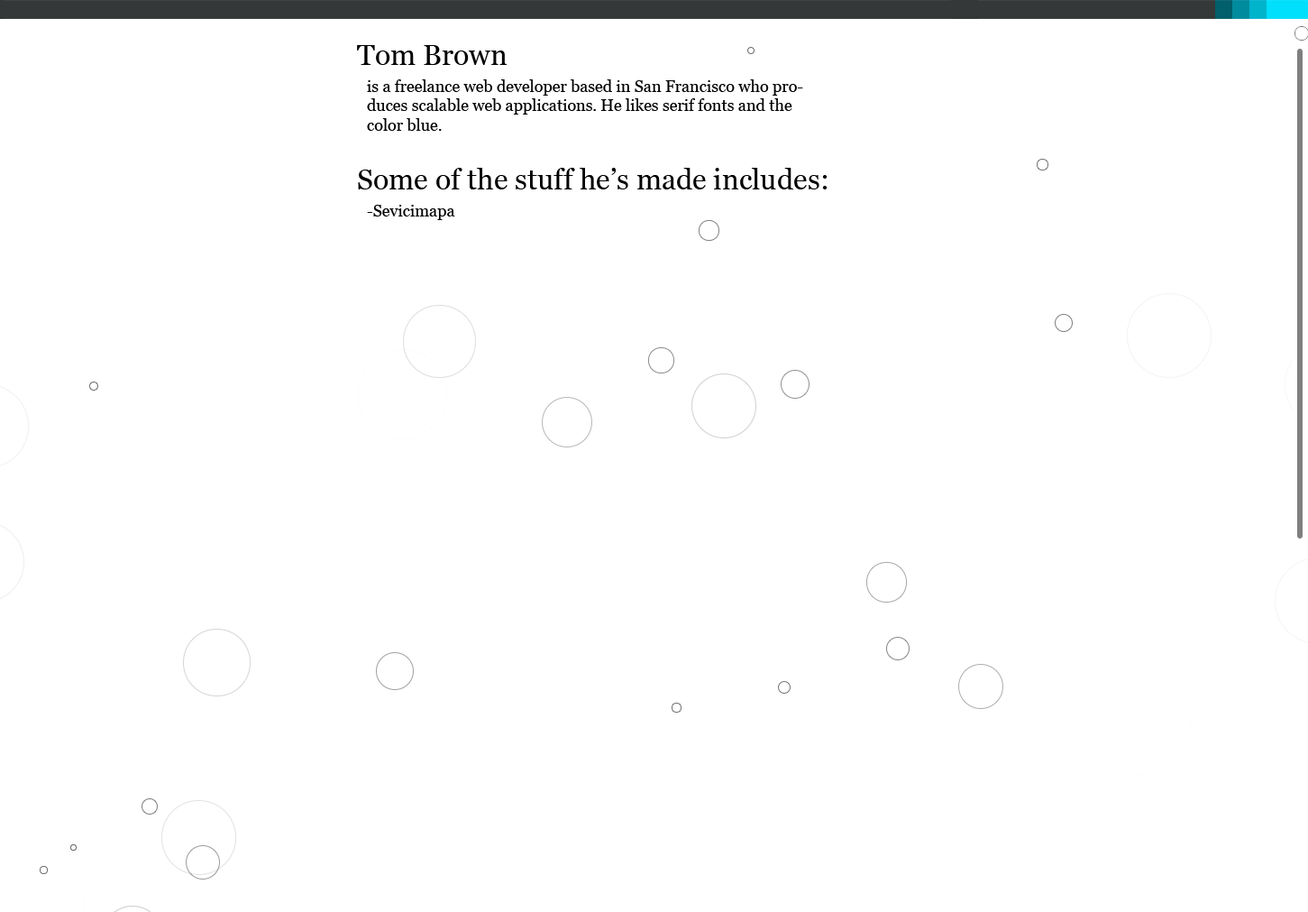
<style>
.page{position:relative;width:1308px;height:912px;background:#ffffff}
.page>*{position:absolute;margin:0}
.t1{font:28.9px "Georgia";color:#000000}
.t2{font:16.2px "Georgia";color:#000000}
</style>
<div class="page">
<p class="t1" style="left:357px;top:45px;width:151px;height:20px">Tom Brown</p>
<p class="t2" style="left:367px;top:79px;width:436px;height:52px">is a freelance web developer based in San Francisco who produces scalable web applications. He likes serif fonts and the color blue.</p>
<p class="t1" style="left:358px;top:168px;width:470px;height:21px">Some of the stuff he’s made includes:</p>
<p class="t2" style="left:367px;top:205px;width:88px;height:15px">-Sevicimapa</p>
</div>
